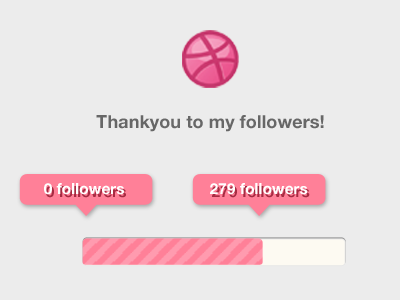
<style>
.page{position:relative;width:400px;height:300px;background:#ececec}
.page>*{position:absolute;margin:0}
.t1{font:18px "HelveticaNeue-Bold";letter-spacing:0.005em;color:#676767}
.t2{font:15.4px "HelveticaNeue-Bold";letter-spacing:0.005em;color:#ffffff}
</style>
<div class="page">
<p class="t1" style="left:96px;top:115px;width:228px;height:17px">Thankyou to my followers!</p>
<p class="t2" style="left:44px;top:183px;width:80px;height:12px">0 followers</p>
<p class="t2" style="left:210px;top:183px;width:98px;height:12px">279 followers</p>
</div>
